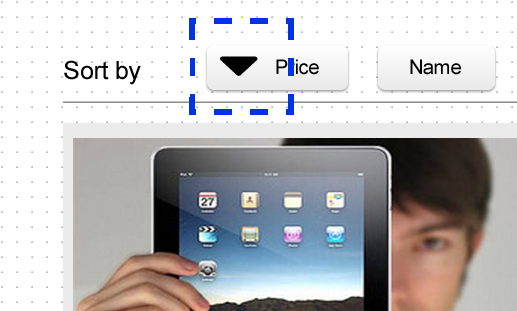
<style>
.page{position:relative;width:517px;height:311px;background:#ffffff}
.page>*{position:absolute;margin:0}
.t1{font:24.9px "ArialMT";letter-spacing:-0.01em;color:#000000}
.t2{font:19.9px "ArialMT";letter-spacing:-0.01em;color:#000000}
</style>
<div class="page">
<p class="t1" style="left:64px;top:60px;width:77px;height:25px">Sort by</p>
<p class="t2" style="left:276px;top:59px;width:43px;height:16px">Price</p>
<p class="t2" style="left:410px;top:59px;width:51px;height:16px">Name</p>
</div>
